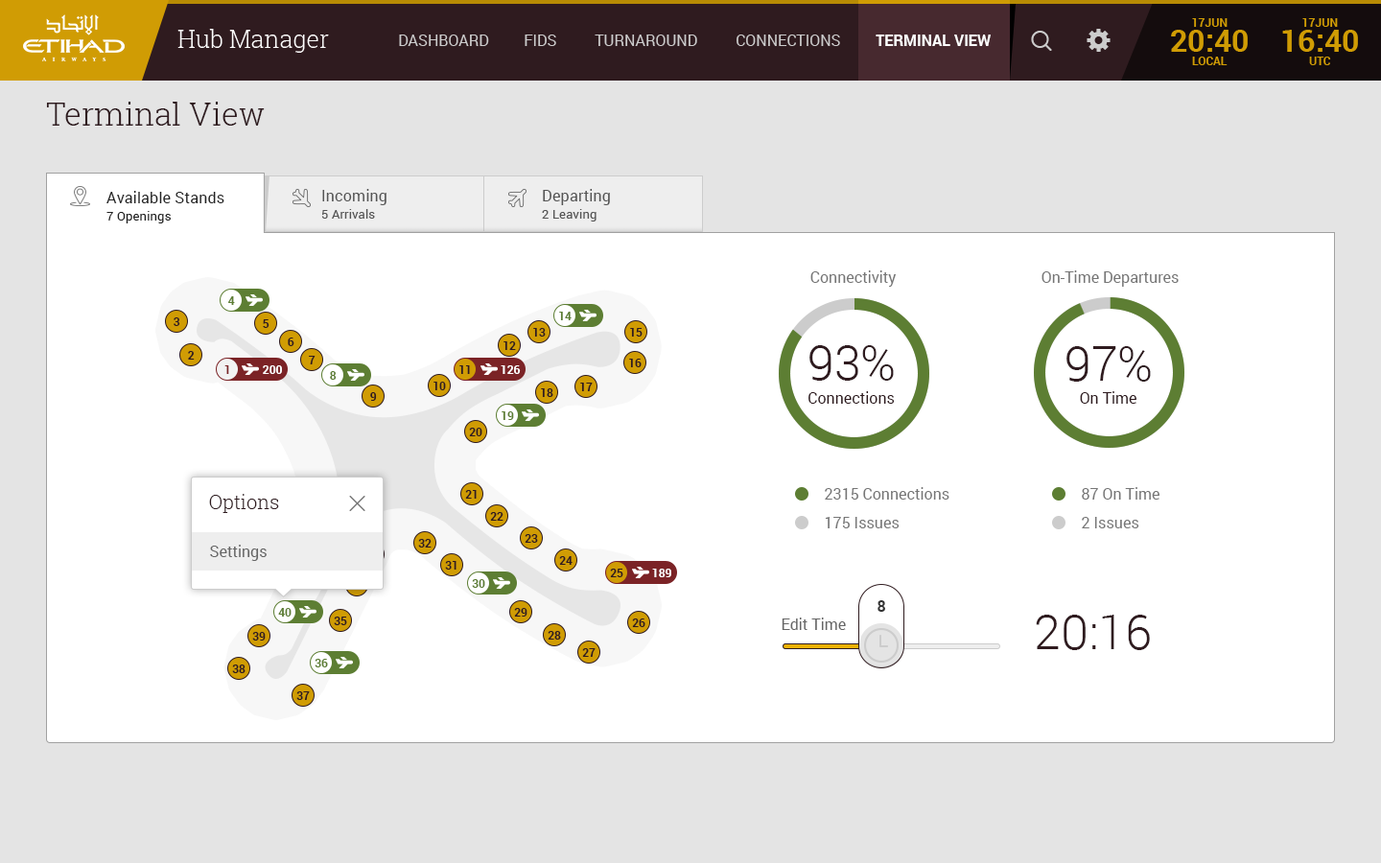
<style>
.page{position:relative;width:1381px;height:863px;background:#ffffff}
.page>*{position:absolute;margin:0}
.t1{font:15.3px "Roboto-Bold";color:#ffffff;text-transform:uppercase}
.t2{font:31.7px "RobotoSlab-Light";color:#2f1b1f}
.t3{font:15.3px "Roboto-Regular";color:#222222}
.t4{font:15.3px "Roboto-Regular";color:#555555}
.t5{font:12.5px "Roboto-Regular";color:#555555}
.t6{font:12.5px "Roboto-Regular";color:#222222}
.t7{font:15.3px "Roboto-Regular";color:#767676}
.t8{font:11.5px "Roboto-Bold";color:#5d7e33}
.t9{font:11.5px "Roboto-Bold";color:#2f1b1f}
.t10{font:48px "Roboto-Light";color:#2f1b1f}
.t11{font:11.5px "Roboto-Bold";color:#7b2326}
.t12{font:11.5px "Roboto-Bold";color:#ffffff}
.t13{font:15.3px "Roboto-Regular";color:#2f1b1f}
.t14{font:19.2px "RobotoSlab-Light";color:#2f1b1f}
.t15{font:15.3px "Roboto-Regular";color:#666666}
.t16{font:15.3px "Roboto-Bold";color:#333333}
</style>
<div class="page">
<p class="t1" style="left:876px;top:35px;width:115px;height:11px">Terminal View</p>
<p class="t2" style="left:46px;top:102px;width:219px;height:24px">Terminal View</p>
<p class="t3" style="left:106px;top:191px;width:118px;height:12px">Available Stands</p>
<p class="t4" style="left:322px;top:189px;width:65px;height:16px">Incoming</p>
<p class="t4" style="left:543px;top:189px;width:67px;height:16px">Departing</p>
<p class="t5" style="left:321px;top:209px;width:54px;height:10px">5 Arrivals</p>
<p class="t5" style="left:542px;top:209px;width:55px;height:13px">2 Leaving</p>
<p class="t6" style="left:106px;top:211px;width:65px;height:12px">7 Openings</p>
<p class="t7" style="left:811px;top:270px;width:86px;height:17px">Connectivity</p>
<p class="t7" style="left:1042px;top:270px;width:137px;height:17px">On-Time Departures</p>
<p class="t8" style="left:228px;top:296px;width:7px;height:9px">4</p>
<p class="t9" style="left:174px;top:317px;width:6px;height:9px">3</p>
<p class="t8" style="left:559px;top:312px;width:13px;height:8px">14</p>
<p class="t9" style="left:263px;top:319px;width:7px;height:9px">5</p>
<p class="t9" style="left:533px;top:328px;width:13px;height:9px">13</p>
<p class="t9" style="left:630px;top:328px;width:13px;height:9px">15</p>
<p class="t9" style="left:288px;top:338px;width:6px;height:8px">6</p>
<p class="t9" style="left:504px;top:341px;width:12px;height:9px">12</p>
<p class="t9" style="left:188px;top:351px;width:7px;height:9px">2</p>
<p class="t10" style="left:810px;top:345px;width:84px;height:36px">93%</p>
<p class="t10" style="left:1067px;top:346px;width:84px;height:36px">97%</p>
<p class="t11" style="left:224px;top:365px;width:5px;height:9px">1</p>
<p class="t12" style="left:263px;top:365px;width:19px;height:9px">200</p>
<p class="t9" style="left:309px;top:356px;width:7px;height:9px">7</p>
<p class="t9" style="left:459px;top:365px;width:11px;height:9px">11</p>
<p class="t12" style="left:501px;top:365px;width:20px;height:9px">126</p>
<p class="t9" style="left:629px;top:359px;width:13px;height:8px">16</p>
<p class="t8" style="left:330px;top:371px;width:7px;height:9px">8</p>
<p class="t9" style="left:434px;top:382px;width:12px;height:8px">10</p>
<p class="t9" style="left:541px;top:388px;width:12px;height:9px">18</p>
<p class="t9" style="left:580px;top:383px;width:13px;height:8px">17</p>
<p class="t9" style="left:370px;top:392px;width:7px;height:9px">9</p>
<p class="t13" style="left:809px;top:391px;width:86px;height:13px">Connections</p>
<p class="t13" style="left:1080px;top:391px;width:57px;height:13px">On Time</p>
<p class="t8" style="left:502px;top:412px;width:12px;height:8px">19</p>
<p class="t9" style="left:469px;top:428px;width:13px;height:8px">20</p>
<p class="t14" style="left:209px;top:494px;width:70px;height:19px">Options</p>
<p class="t9" style="left:465px;top:490px;width:12px;height:9px">21</p>
<p class="t7" style="left:825px;top:487px;width:125px;height:13px">2315 Connections</p>
<p class="t7" style="left:1082px;top:487px;width:78px;height:13px">87 On Time</p>
<p class="t9" style="left:490px;top:512px;width:14px;height:9px">22</p>
<p class="t7" style="left:825px;top:517px;width:75px;height:12px">175 Issues</p>
<p class="t7" style="left:1082px;top:517px;width:58px;height:12px">2 Issues</p>
<p class="t15" style="left:210px;top:545px;width:57px;height:16px">Settings</p>
<p class="t9" style="left:418px;top:539px;width:14px;height:9px">32</p>
<p class="t9" style="left:525px;top:534px;width:13px;height:9px">23</p>
<p class="t9" style="left:559px;top:556px;width:14px;height:9px">24</p>
<p class="t9" style="left:445px;top:561px;width:12px;height:9px">31</p>
<p class="t9" style="left:610px;top:569px;width:13px;height:8px">25</p>
<p class="t12" style="left:652px;top:569px;width:19px;height:8px">189</p>
<p class="t8" style="left:472px;top:579px;width:13px;height:9px">30</p>
<p class="t16" style="left:878px;top:600px;width:7px;height:12px">8</p>
<p class="t8" style="left:278px;top:608px;width:14px;height:9px">40</p>
<p class="t9" style="left:334px;top:617px;width:13px;height:8px">35</p>
<p class="t9" style="left:514px;top:608px;width:14px;height:9px">29</p>
<p class="t15" style="left:782px;top:618px;width:64px;height:12px">Edit Time</p>
<p class="t10" style="left:1036px;top:615px;width:114px;height:35px">20:16</p>
<p class="t9" style="left:632px;top:619px;width:14px;height:8px">26</p>
<p class="t9" style="left:252px;top:632px;width:14px;height:9px">39</p>
<p class="t9" style="left:548px;top:631px;width:13px;height:9px">28</p>
<p class="t9" style="left:582px;top:648px;width:14px;height:9px">27</p>
<p class="t9" style="left:232px;top:665px;width:14px;height:8px">38</p>
<p class="t8" style="left:315px;top:659px;width:13px;height:9px">36</p>
<p class="t9" style="left:296px;top:692px;width:14px;height:8px">37</p>
</div>
